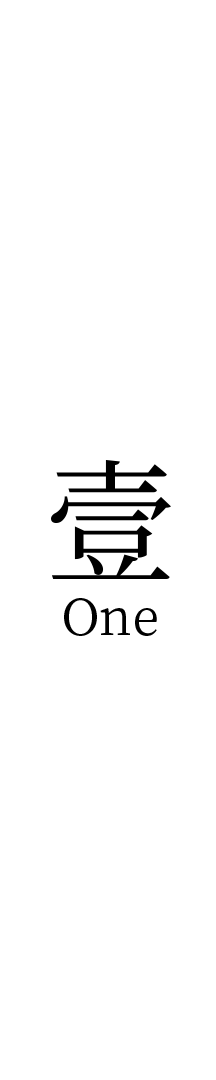
<style>
.page{position:relative;width:216px;height:1080px;background:#ffffff}
.page>*{position:absolute;margin:0}
.t1{font:133.3px "NotoSerifCJKsc-Regular";color:#000000}
.t2{font:50px "NotoSerifCJKsc-Regular";color:#000000}
</style>
<div class="page">
<p class="t1" style="left:51px;top:460px;width:120px;height:119px">壹</p>
<p class="t2" style="left:64px;top:598px;width:93px;height:38px">One</p>
</div>
